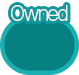
<style>
.page{position:relative;width:79px;height:75px;background:#078081}
.page>*{position:absolute;margin:0}
.t1{font:20px "GothicMB101Pro-Light";letter-spacing:-0.08em;color:#fff6f3;scale:0.9 1}
</style>
<div class="page">
<p class="t1" style="left:11px;top:5px;width:57px;height:16px">Owned</p>
</div>
